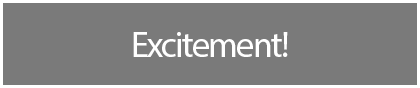
<style>
.page{position:relative;width:420px;height:88px;background:#7a7a7a}
.page>*{position:absolute;margin:0}
.t1{font:36px "MyriadPro-Regular";letter-spacing:-0.05em;color:#ffffff}
</style>
<div class="page">
<p class="t1" style="left:133px;top:32px;width:155px;height:25px">Excitement!</p>
</div>
